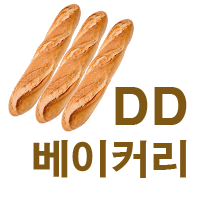
<style>
.page{position:relative;width:200px;height:200px;background:#ffffff}
.page>*{position:absolute;margin:0}
.t1{font:40px "H2gtrE";color:#7e5714}
.t2{font:50px "H2gtrE";color:#7e5714}
</style>
<div class="page">
<p class="t1" style="left:33px;top:87px;width:154px;height:91px;text-align:right"><span class="t2">DD<br></span>베이커리</p>
</div>
